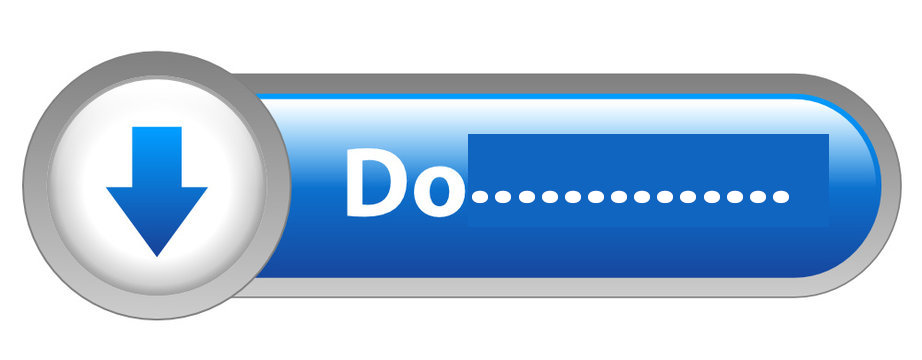
<style>
.page{position:relative;width:922px;height:360px;background:#ffffff}
.page>*{position:absolute;margin:0}
.t1{font:91.8px "MyriadArabic-Bold";color:#ffffff;scale:1.36 1}
</style>
<div class="page">
<p class="t1" style="left:472px;top:190px;width:317px;height:14px">..............</p>
</div>
